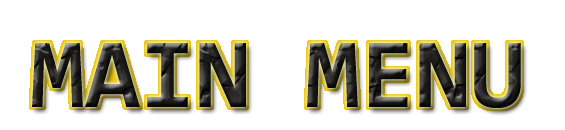
<style>
.page{position:relative;width:565px;height:130px;background:#ffffff}
.page>*{position:absolute;margin:0}
.t1{font:100px "Consolas-Bold";color:#1f1e1c}
</style>
<div class="page">
<p class="t1" style="left:32px;top:43px;width:489px;height:65px">MAIN MENU</p>
</div>
